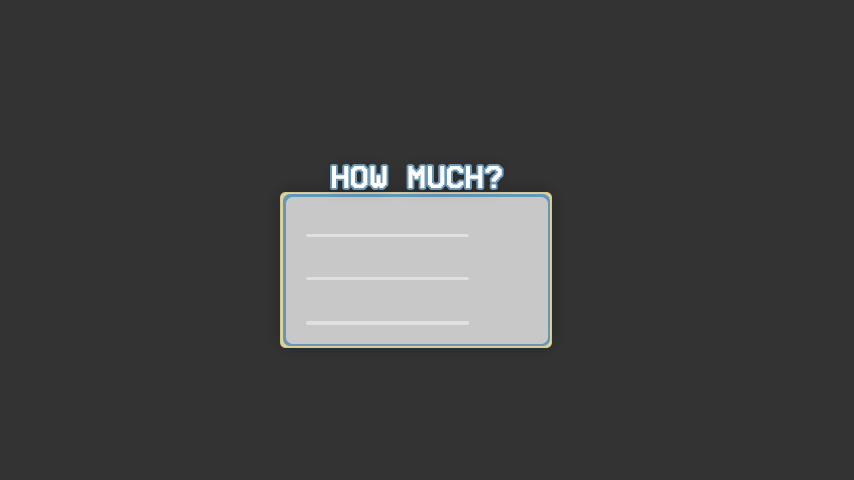
<style>
.page{position:relative;width:854px;height:480px;background:#333333}
.page>*{position:absolute;margin:0}
.t1{font:31.3px "VCROSDMono";color:#ffffff;font-weight:bold}
</style>
<div class="page">
<p class="t1" style="left:332px;top:166px;width:170px;height:22px">HOW MUCH?</p>
</div>
